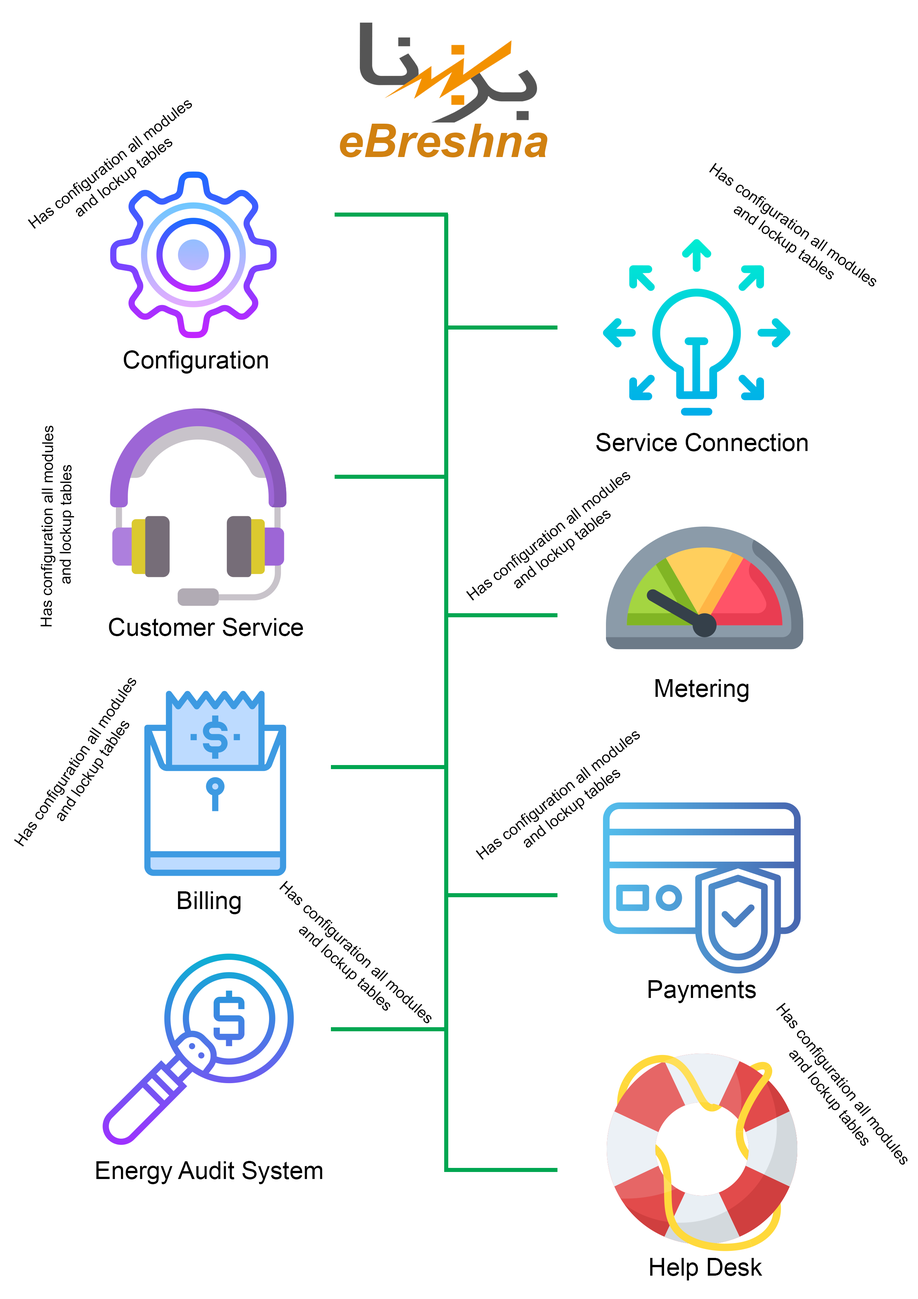
<style>
.page{position:relative;width:918px;height:1299px;background:#ffffff}
.page>*{position:absolute;margin:0}
.t1{font:15.4px "ArialMT";color:#000000}
.t2{font:46.3px "Arial-BoldItalicMT";color:#d18110}
.t3{font:24.7px "ArialMT";color:#000000}
</style>
<div class="page">
<p class="t1" style="left:28px;top:100px;width:164px;height:129px;text-align:center;rotate:-38deg">Has configuration all modules <br>and lockup tables</p>
<p class="t2" style="left:340px;top:124px;width:208px;height:33px">eBreshna</p>
<p class="t1" style="left:709px;top:163px;width:168px;height:124px;text-align:center;rotate:35deg">Has configuration all modules <br>and lockup tables</p>
<p class="t3" style="left:124px;top:350px;width:144px;height:24px">Configuration</p>
<p class="t1" style="left:40px;top:425px;width:34px;height:201px;text-align:center;rotate:-90deg">Has configuration all modules <br>and lockup tables</p>
<p class="t3" style="left:596px;top:433px;width:212px;height:18px">Service Connection</p>
<p class="t1" style="left:466px;top:472px;width:164px;height:128px;text-align:center;rotate:-38deg">Has configuration all modules <br>and lockup tables</p>
<p class="t3" style="left:109px;top:618px;width:194px;height:18px">Customer Service</p>
<p class="t1" style="left:14px;top:678px;width:122px;height:169px;text-align:center;rotate:-55deg">Has configuration all modules <br>and lockup tables</p>
<p class="t3" style="left:655px;top:679px;width:94px;height:23px">Metering</p>
<p class="t1" style="left:476px;top:731px;width:164px;height:129px;text-align:center;rotate:-38deg">Has configuration all modules <br>and lockup tables</p>
<p class="t1" style="left:279px;top:880px;width:153px;height:143px;text-align:center;rotate:42deg">Has configuration all modules <br>and lockup tables</p>
<p class="t3" style="left:178px;top:891px;width:63px;height:23px">Billing</p>
<p class="t3" style="left:649px;top:980px;width:107px;height:23px">Payments</p>
<p class="t1" style="left:776px;top:1002px;width:132px;height:163px;text-align:center;rotate:51deg">Has configuration all modules <br>and lockup tables</p>
<p class="t3" style="left:96px;top:1161px;width:226px;height:23px">Energy Audit System</p>
<p class="t3" style="left:650px;top:1258px;width:113px;height:22px">Help Desk</p>
</div>
